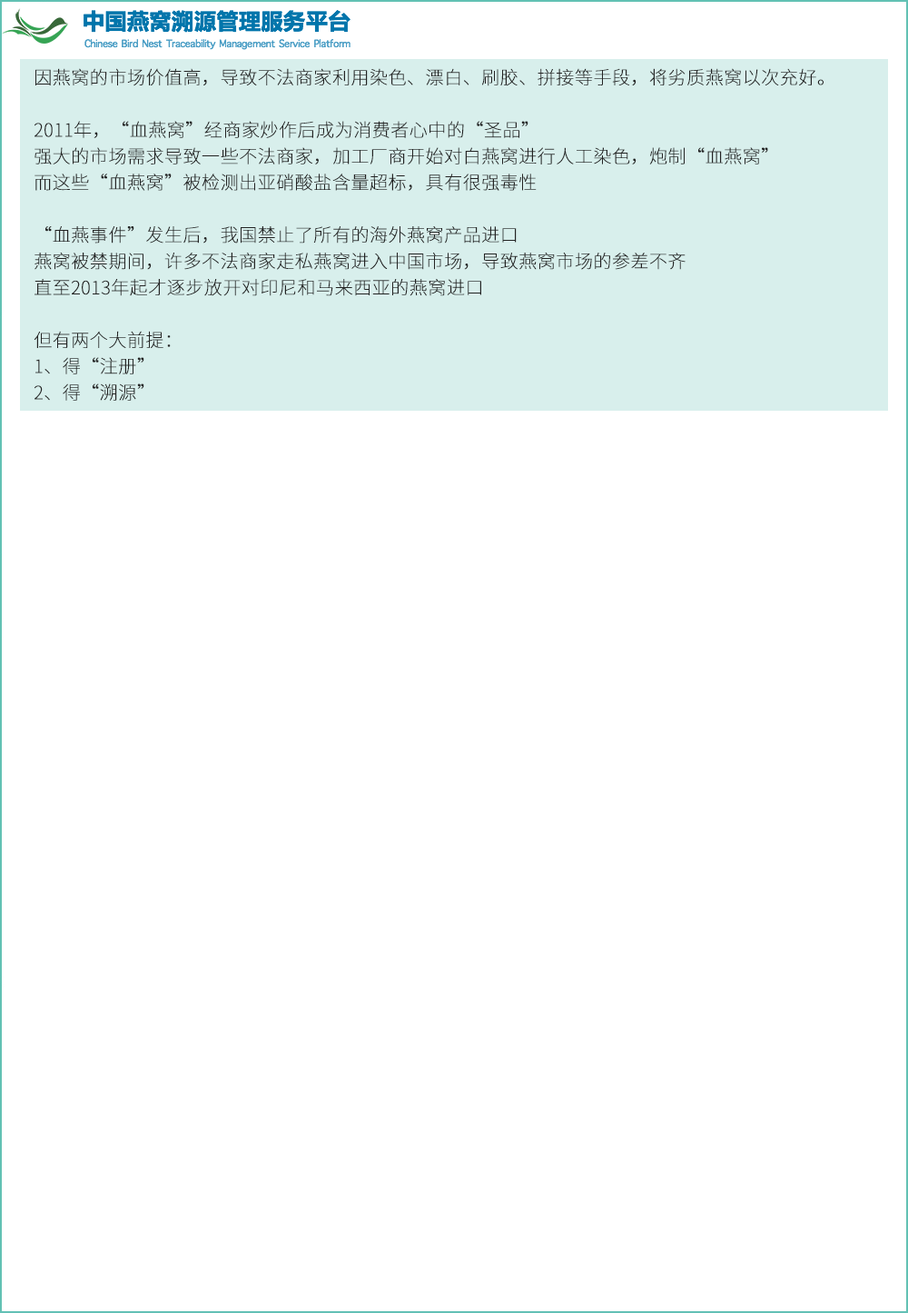
<style>
.page{position:relative;width:908px;height:1313px;background:#ffffff}
.page>*{position:absolute;margin:0}
.t1{font:18.2px/26.2px "SourceHanSansSC-ExtraLight";color:#222222;text-transform:uppercase;font-weight:bold}
</style>
<div class="page">
<p class="t1" style="left:34px;top:68px;width:790px;height:333px">因燕窝的市场价值高，导致不法商家利用染色、漂白、刷胶、拼接等手段，将劣质燕窝以次充好。<br><br>2011年，“血燕窝”经商家炒作后成为消费者心中的“圣品”<br>强大的市场需求导致一些不法商家，加工厂商开始对白燕窝进行人工染色，炮制“血燕窝”<br>而这些“血燕窝”被检测出亚硝酸盐含量超标，具有很强毒性<br><br>“血燕事件”发生后，我国禁止了所有的海外燕窝产品进口<br>燕窝被禁期间，许多不法商家走私燕窝进入中国市场，导致燕窝市场的参差不齐<br>直至2013年起才逐步放开对印尼和马来西亚的燕窝进口<br><br>但有两个大前提：<br>1、得“注册”<br>2、得“溯源”</p>
</div>
